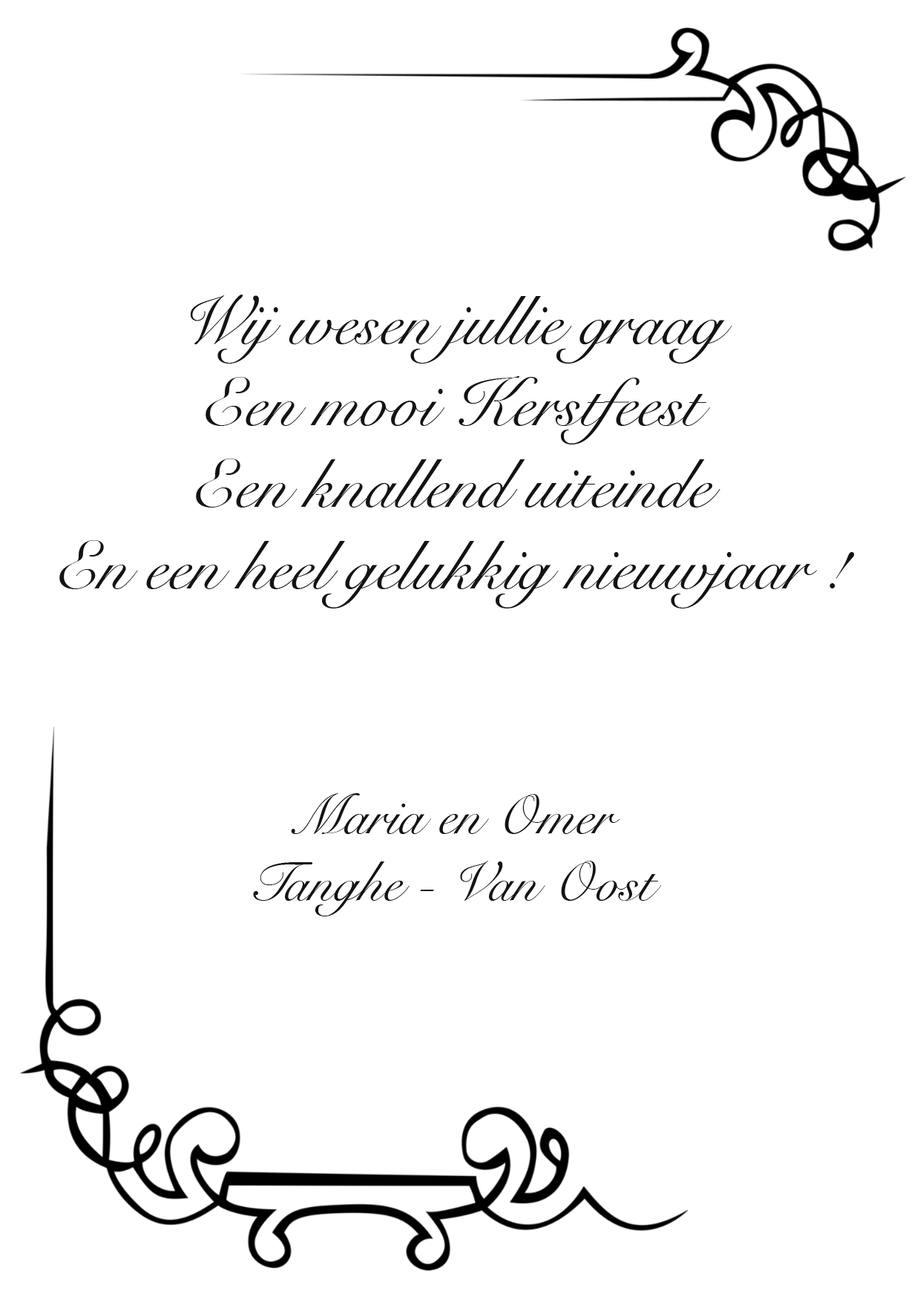
<style>
.page{position:relative;width:920px;height:1297px;background:#ffffff}
.page>*{position:absolute;margin:0}
.t1{font:68px "SnellRoundhand";color:#131313}
.t2{font:55.6px "SnellRoundhand";color:#131313}
</style>
<div class="page">
<p class="t1" style="left:59px;top:294px;width:795px;height:622px;text-align:center">Wij wesen jullie graag<br>Een mooi Kerstfeest<br>Een knallend uiteinde<br>En een heel gelukkig nieuwjaar !<br><br><br><span class="t2">Maria en Omer<br>Tanghe - Van Oost</span></p>
</div>
